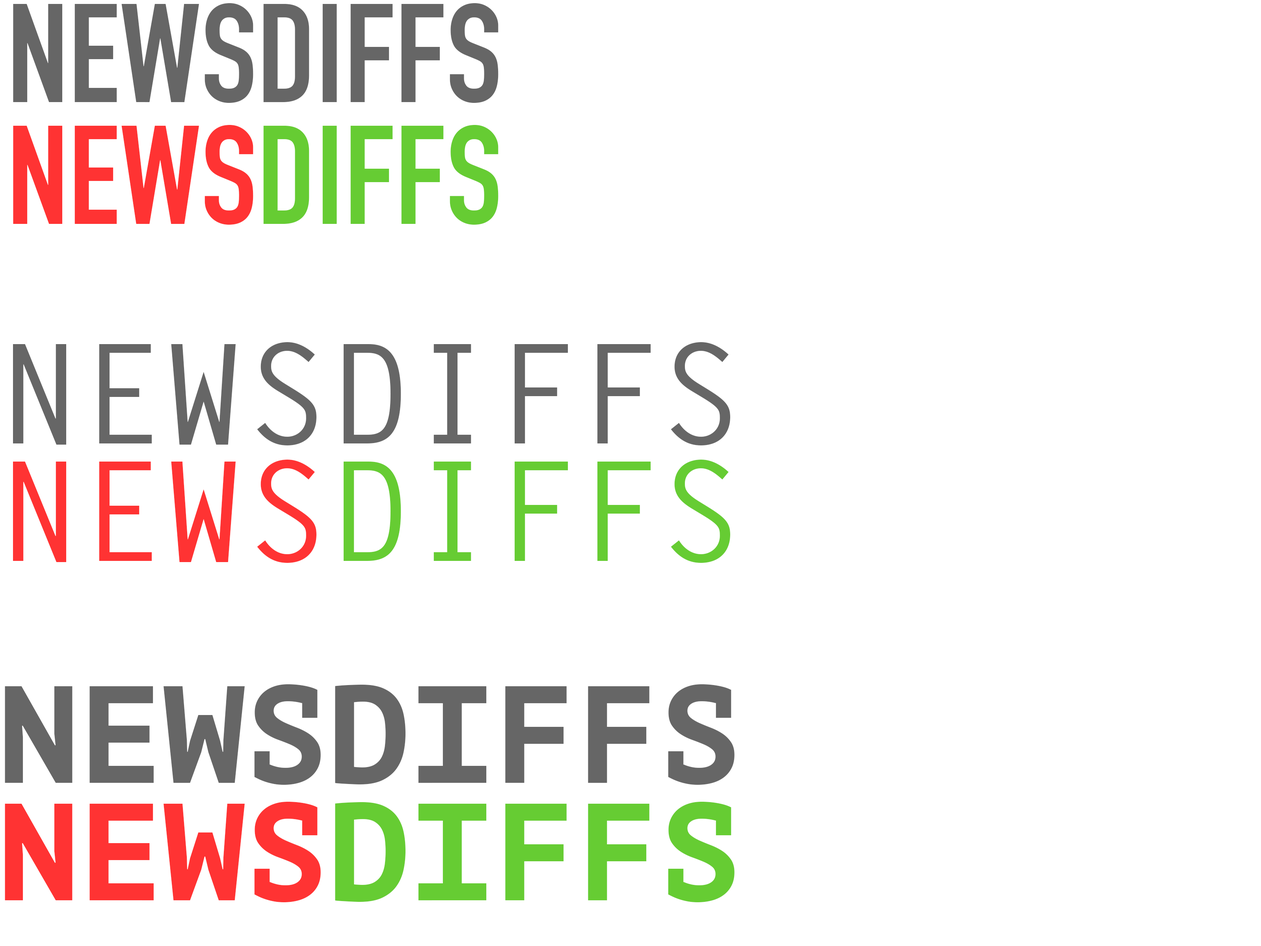
<style>
.page{position:relative;width:1261px;height:946px;background:#ffffff}
.page>*{position:absolute;margin:0}
.t1{font:137.9px "DINCondensed-Bold";color:#666666}
.t2{font:137.9px "DINCondensed-Bold";color:#66cc33}
.t3{font:137.9px "DINCondensed-Bold";color:#ff3333}
.t4{font:137.9px "LetterGothicStd-Bold";color:#666666}
.t5{font:137.9px "LetterGothicStd-Bold";color:#66cc33}
.t6{font:137.9px "LetterGothicStd-Bold";color:#ff3333}
.t7{font:137.9px "PTMono-Bold";color:#666666}
.t8{font:137.9px "PTMono-Bold";color:#66cc33}
.t9{font:137.9px "PTMono-Bold";color:#ff3333}
</style>
<div class="page">
<p class="t1" style="left:13px;top:3px;width:485px;height:100px">NEWSDIFFS</p>
<p class="t2" style="left:13px;top:125px;width:485px;height:100px"><span class="t3">NEWS</span>DIFFS</p>
<p class="t4" style="left:13px;top:342px;width:717px;height:103px">NEWSDIFFS</p>
<p class="t5" style="left:13px;top:459px;width:717px;height:104px"><span class="t6">NEWS</span>DIFFS</p>
<p class="t7" style="left:5px;top:684px;width:729px;height:101px">NEWSDIFFS</p>
<p class="t8" style="left:5px;top:801px;width:729px;height:101px"><span class="t9">NEWS</span>DIFFS</p>
</div>
